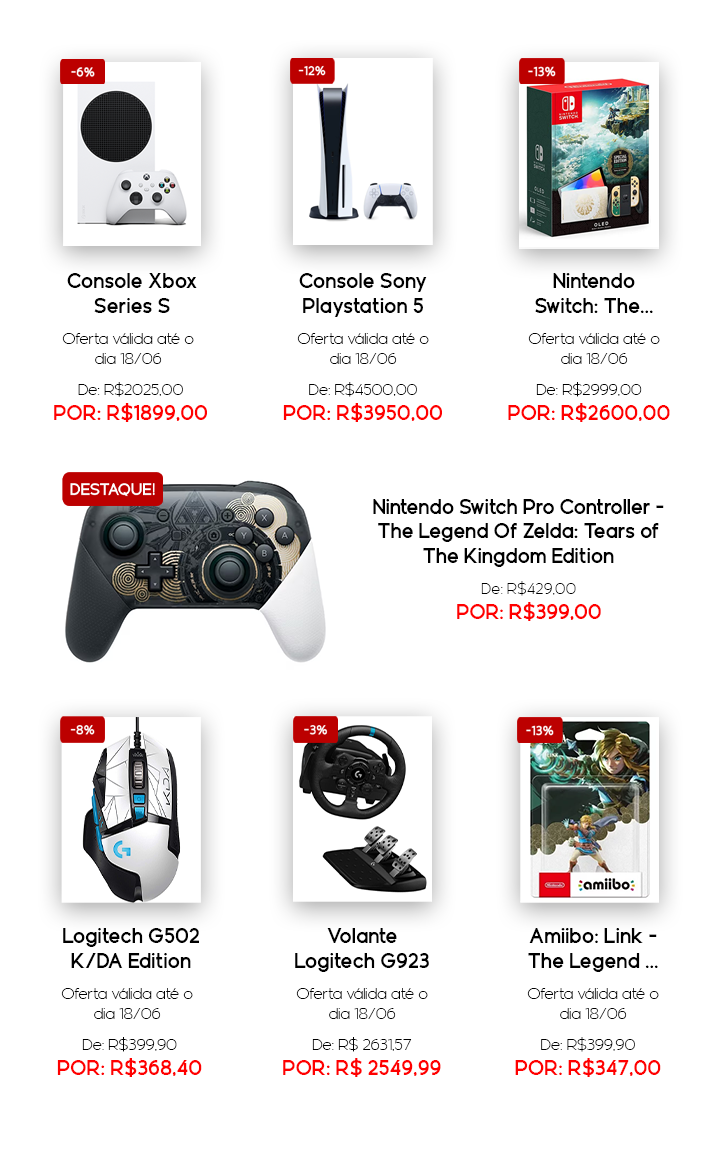
<style>
.page{position:relative;width:720px;height:1155px;background:#ffffff}
.page>*{position:absolute;margin:0}
.t1{font:20.8px "Geomatrix-Bold";color:#000000}
.t2{font:16.7px "Geomatrix-Thin";color:#000000}
.t3{font:20.8px "Geomatrix-Bold";color:#ff0000}
.t4{font:20.6px "Geomatrix-Bold";color:#000000}
.t5{font:20.6px "Geomatrix-Bold";color:#ff0000}
.t6{font:16.5px "Geomatrix-Thin";color:#000000}
</style>
<div class="page">
<p class="t1" style="left:67px;top:273px;width:130px;height:40px;text-align:center">Console Xbox Series S</p>
<p class="t1" style="left:299px;top:273px;width:128px;height:44px;text-align:center">Console Sony Playstation 5</p>
<p class="t1" style="left:535px;top:273px;width:118px;height:40px;text-align:center">Nintendo Switch: The...</p>
<p class="t2" style="left:62px;top:333px;width:132px;height:31px;text-align:center">Oferta válida até o dia 18/06</p>
<p class="t2" style="left:297px;top:333px;width:132px;height:31px;text-align:center">Oferta válida até o dia 18/06</p>
<p class="t2" style="left:528px;top:333px;width:132px;height:31px;text-align:center">Oferta válida até o dia 18/06</p>
<p class="t3" style="left:54px;top:382px;width:153px;height:40px;text-align:center"><span class="t2">De: R$2025,00<br></span>POR: R$1899,00</p>
<p class="t3" style="left:283px;top:382px;width:159px;height:40px;text-align:center"><span class="t2">De: R$4500,00<br></span>POR: R$3950,00</p>
<p class="t3" style="left:508px;top:382px;width:162px;height:40px;text-align:center"><span class="t2">De: R$2999,00<br></span>POR: R$2600,00</p>
<p class="t4" style="left:373px;top:499px;width:291px;height:68px;text-align:center">Nintendo Switch Pro Controller - The Legend Of Zelda: Tears of The Kingdom Edition</p>
<p class="t5" style="left:457px;top:581px;width:144px;height:40px;text-align:center"><span class="t6">De: R$429,00<br></span>POR: R$399,00</p>
<p class="t1" style="left:63px;top:928px;width:136px;height:40px;text-align:center">Logitech G502 K/DA Edition</p>
<p class="t1" style="left:295px;top:928px;width:134px;height:44px;text-align:center">Volante Logitech G923</p>
<p class="t1" style="left:528px;top:928px;width:130px;height:44px;text-align:center">Amiibo: Link - The Legend ...</p>
<p class="t2" style="left:61px;top:988px;width:132px;height:31px;text-align:center">Oferta válida até o dia 18/06</p>
<p class="t2" style="left:296px;top:988px;width:132px;height:31px;text-align:center">Oferta válida até o dia 18/06</p>
<p class="t2" style="left:527px;top:988px;width:132px;height:31px;text-align:center">Oferta válida até o dia 18/06</p>
<p class="t3" style="left:57px;top:1037px;width:145px;height:40px;text-align:center"><span class="t2">De: R$399,90<br></span>POR: R$368,40</p>
<p class="t3" style="left:283px;top:1037px;width:158px;height:40px;text-align:center"><span class="t2">De: R$ 2631,57<br></span>POR: R$ 2549,99</p>
<p class="t3" style="left:515px;top:1037px;width:146px;height:40px;text-align:center"><span class="t2">De: R$399,90<br></span>POR: R$347,00</p>
</div>
